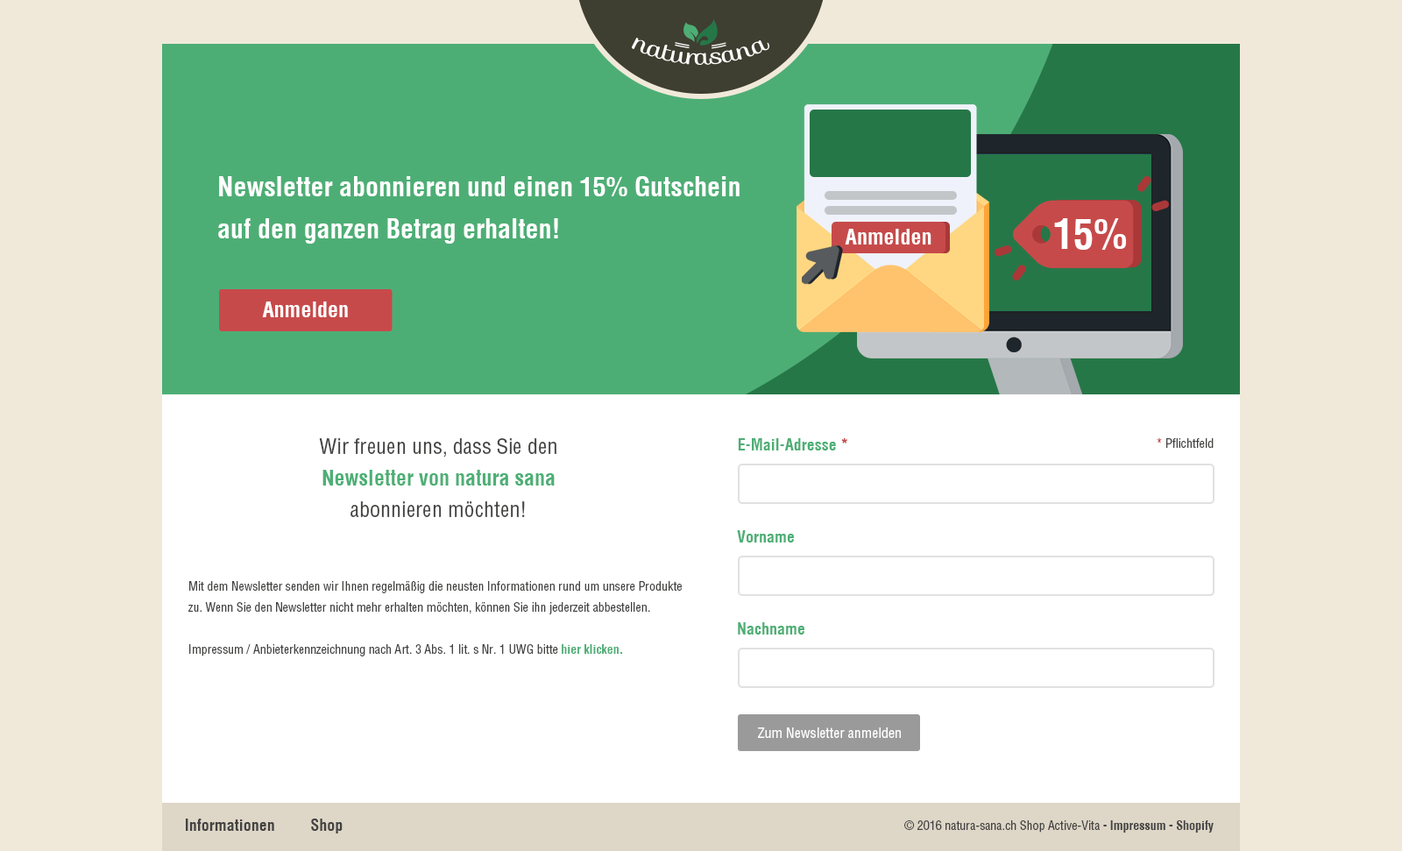
<style>
.page{position:relative;width:1402px;height:851px;background:#ffffff}
.page>*{position:absolute;margin:0}
.t1{font:26.3px/42.1px "Helvetica-Condensed-Bold";color:#ffffff}
.t2{font:40.3px "Helvetica-Condensed-Bold";color:#ffffff}
.t3{font:21px "Helvetica-Condensed-Bold";color:#ffffff}
.t4{font:12.3px/21px "Helvetica-Condensed";color:#434342}
.t5{font:21px/31.5px "Helvetica-Condensed";color:#434342}
.t6{font:21px/31.5px "Helvetica-Condensed-Bold";color:#4daf75}
.t7{font:12.3px/21px "Helvetica-Condensed-Bold";color:#4dae75}
.t8{font:15.8px "Helvetica-Condensed-Bold";color:#4dae75}
.t9{font:15.8px "Helvetica-Condensed-Bold";color:#c74a4a}
.t10{font:12.3px "Helvetica-Condensed";color:#434342}
.t11{font:12.3px "Helvetica-Condensed-Bold";color:#c74a4a}
.t12{font:14px "Helvetica-Condensed";color:#ffffff}
.t13{font:15.8px "Helvetica-Condensed-Bold";color:#434342}
.t14{font:12.3px "Helvetica-Condensed-Bold";color:#434342}
</style>
<div class="page">
<p class="t1" style="left:218px;top:176px;width:521px;height:68px">Newsletter abonnieren und einen 15% Gutschein<br>auf den ganzen Betrag erhalten!</p>
<p class="t2" style="left:1054px;top:218px;width:72px;height:32px">15%</p>
<p class="t3" style="left:845px;top:229px;width:86px;height:15px">Anmelden</p>
<p class="t3" style="left:262px;top:301px;width:86px;height:16px">Anmelden</p>
<p class="t4" style="left:188px;top:438px;width:494px;height:218px;text-align:center"><span class="t5">Wir freuen uns, dass Sie den</span><span class="t6"> <br>Newsletter von natura sana <br></span><span class="t5">abonnieren möchten!<br><br></span><br>Mit dem Newsletter senden wir Ihnen regelmäßig die neusten Informationen rund um unsere Produkte zu. Wenn Sie den Newsletter nicht mehr erhalten möchten, können Sie ihn jederzeit abbestellen.<br><br>Impressum / Anbieterkennzeichnung nach Art. 3 Abs. 1 lit. s Nr. 1 UWG bitte <span class="t7">hier klicken.</span></p>
<p class="t8" style="left:738px;top:438px;width:109px;height:12px">E-Mail-Adresse <span class="t9">*</span></p>
<p class="t10" style="left:1156px;top:438px;width:57px;height:10px"><span class="t11">* </span>Pflichtfeld</p>
<p class="t8" style="left:737px;top:530px;width:57px;height:12px">Vorname</p>
<p class="t8" style="left:738px;top:622px;width:66px;height:12px">Nachname</p>
<p class="t12" style="left:758px;top:727px;width:143px;height:11px">Zum Newsletter anmelden</p>
<p class="t13" style="left:186px;top:818px;width:157px;height:15px">Informationen         Shop</p>
<p class="t10" style="left:904px;top:820px;width:309px;height:12px">© 2016 natura-sana.ch Shop Active-Vita <span class="t14">- Impressum - Shopify</span></p>
</div>
